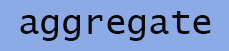
<style>
.page{position:relative;width:229px;height:51px;background:#8caae6}
.page>*{position:absolute;margin:0}
.t1{font:36px "LucidaConsole";color:#0a0a0a}
</style>
<div class="page">
<p class="t1" style="left:20px;top:11px;width:191px;height:30px">aggregate</p>
</div>
